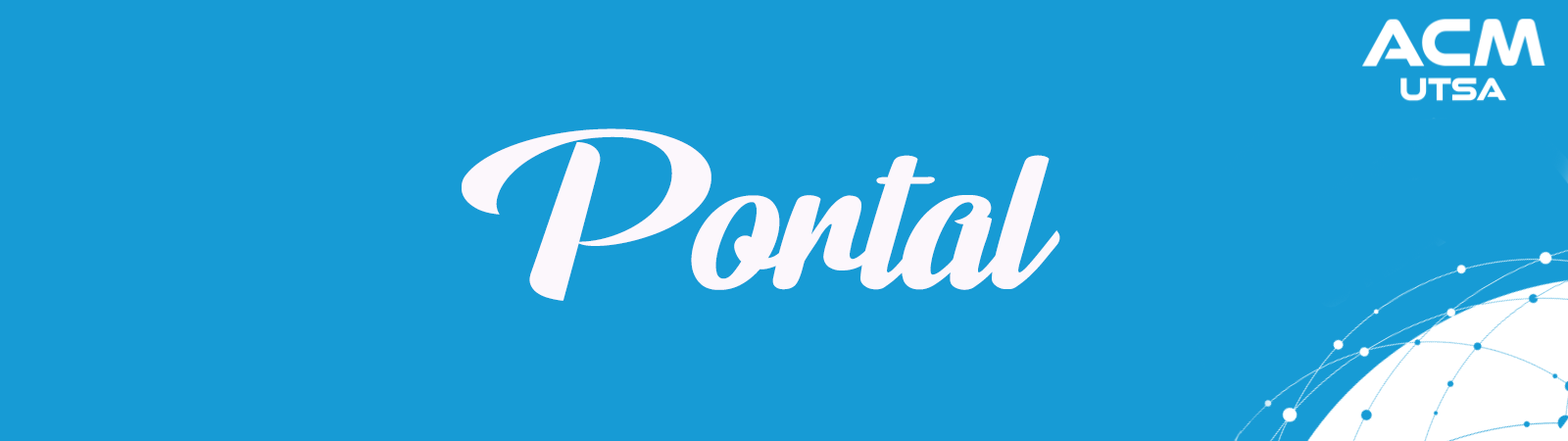
<style>
.page{position:relative;width:1568px;height:441px;background:#179bd5}
.page>*{position:absolute;margin:0}
.t1{font:317.5px "LemonJellyPersonalUse";letter-spacing:-0.03em;color:#fcf7fc}
</style>
<div class="page">
<p class="t1" style="left:462px;top:128px;width:598px;height:173px">Portal</p>
</div>
